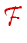
<style>
.page{position:relative;width:27px;height:43px;background:#ffffff}
.page>*{position:absolute;margin:0}
.t1{font:28px "HLNhenhang";color:#d40000}
</style>
<div class="page">
<p class="t1" style="left:4px;top:6px;width:18px;height:20px">F</p>
</div>
